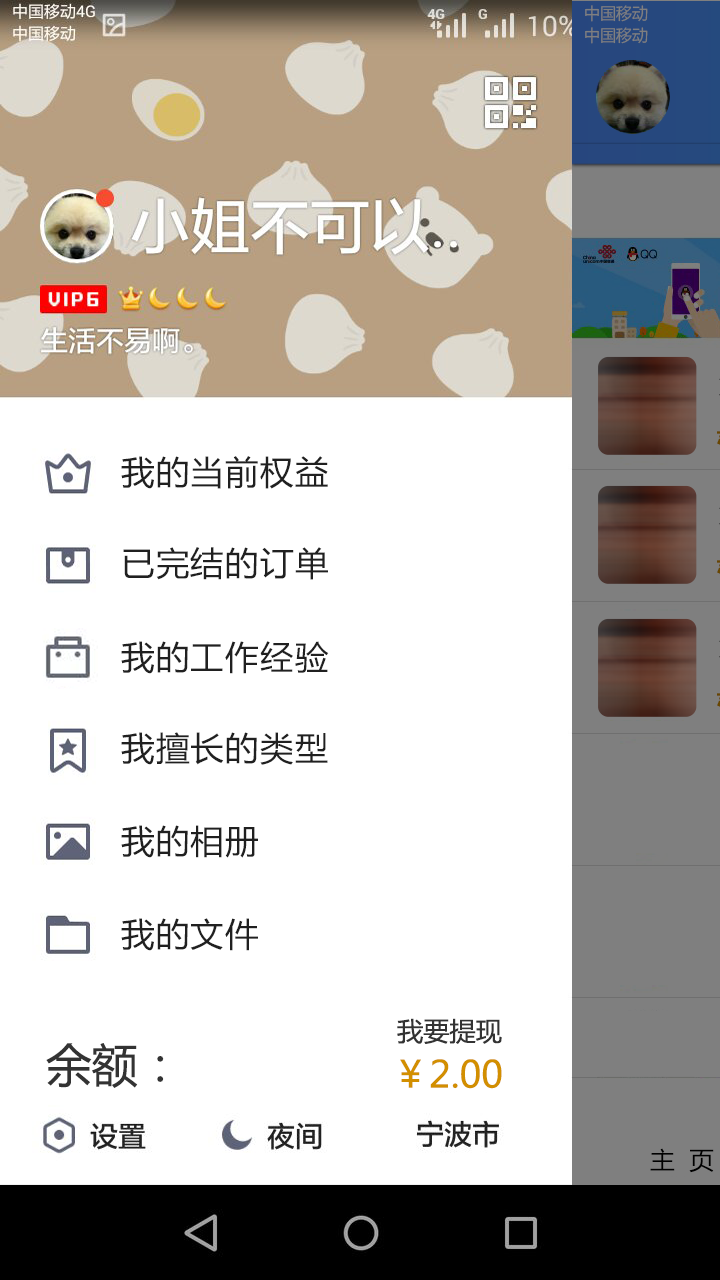
<style>
.page{position:relative;width:720px;height:1280px;background:#ffffff}
.page>*{position:absolute;margin:0}
.t1{font:16.2px "MicrosoftYaHei";color:#7f7f7f;text-transform:uppercase}
.t2{font:33.2px "MicrosoftYaHei";letter-spacing:0.04em;color:#202020}
.t3{font:26.1px "MicrosoftYaHei";color:#333333}
.t4{font:45.8px "MicrosoftYaHei";color:#333333}
.t5{font:36.8px "MicrosoftYaHei";color:#d28f00}
.t6{font:24.3px "MicrosoftYaHei";color:#000000}
</style>
<div class="page">
<p class="t1" style="left:585px;top:5px;width:63px;height:17px">中国移动</p>
<p class="t1" style="left:585px;top:27px;width:63px;height:17px">中国移动</p>
<p class="t2" style="left:121px;top:456px;width:207px;height:33px">我的当前权益</p>
<p class="t2" style="left:123px;top:547px;width:205px;height:33px">已完结的订单</p>
<p class="t2" style="left:121px;top:641px;width:208px;height:33px">我的工作经验</p>
<p class="t2" style="left:121px;top:732px;width:207px;height:33px">我擅长的类型</p>
<p class="t2" style="left:121px;top:825px;width:137px;height:33px">我的相册</p>
<p class="t2" style="left:121px;top:918px;width:137px;height:33px">我的文件</p>
<p class="t3" style="left:397px;top:1018px;width:105px;height:26px">我要提现</p>
<p class="t4" style="left:46px;top:1043px;width:118px;height:45px">余额：</p>
<p class="t5" style="left:400px;top:1059px;width:102px;height:30px">￥2.00</p>
<p class="t6" style="left:650px;top:1148px;width:64px;height:25px">主  页</p>
</div>
